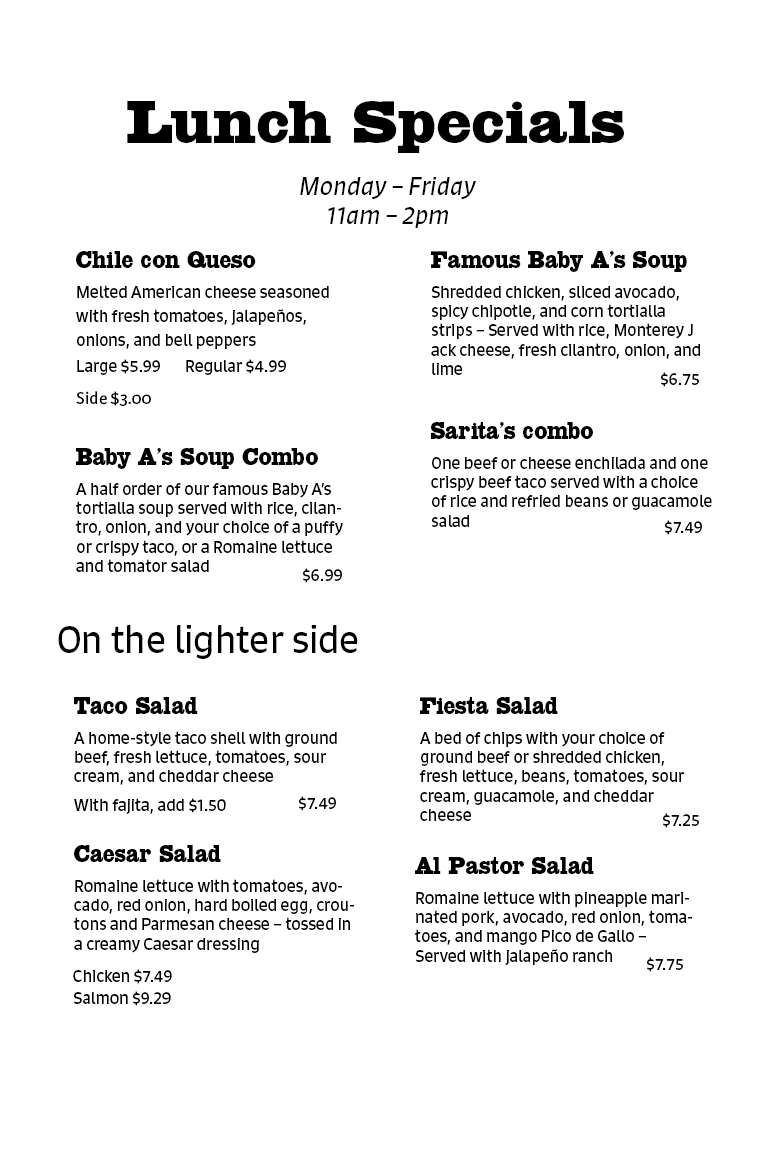
<style>
.page{position:relative;width:778px;height:1167px;background:#ffffff}
.page>*{position:absolute;margin:0}
.t1{font:60px "HWTSlabColumbian";color:#000000;scale:1.19 1}
.t2{font:24px "Signo-Italic";color:#000000}
.t3{font:24px "HWTSlabColumbian";color:#000000}
.t4{font:16px/24px "Signo-Regular";color:#000000}
.t5{font:16px "Signo-Regular";color:#000000}
.t6{font:18px "KarminaSans";color:#000000}
.t7{font:36px "Signo-Regular";color:#000000}
</style>
<div class="page">
<p class="t1" style="left:127px;top:101px;width:497px;height:52px">Lunch Specials</p>
<p class="t2" style="left:300px;top:177px;width:176px;height:51px;text-align:center">Monday – Friday<br>11am – 2pm</p>
<p class="t3" style="left:76px;top:251px;width:180px;height:17px">Chile con Queso</p>
<p class="t3" style="left:431px;top:251px;width:256px;height:21px">Famous Baby A’s Soup</p>
<p class="t4" style="left:76px;top:285px;width:253px;height:64px">Melted American cheese seasoned with fresh tomatoes, jalapeños, onions, and bell peppers</p>
<p class="t5" style="left:431px;top:286px;width:269px;height:89px">Shredded chicken, sliced avocado, spicy chipotle, and corn tortialla <br>strips – Served with rice, Monterey J<br>ack cheese, fresh cilantro, onion, and lime</p>
<p class="t5" style="left:77px;top:359px;width:83px;height:16px">Large $5.99</p>
<p class="t5" style="left:186px;top:359px;width:100px;height:16px">Regular $4.99</p>
<p class="t5" style="left:661px;top:372px;width:38px;height:15px">$6.75</p>
<p class="t6" style="left:76px;top:391px;width:75px;height:15px">Side $3.00</p>
<p class="t3" style="left:431px;top:422px;width:162px;height:17px">Sarita’s combo</p>
<p class="t3" style="left:76px;top:448px;width:242px;height:21px">Baby A’s Soup Combo</p>
<p class="t5" style="left:431px;top:457px;width:281px;height:70px">One beef or cheese enchilada and one crispy beef taco served with a choice of rice and refried beans or guacamole salad</p>
<p class="t5" style="left:75px;top:483px;width:268px;height:89px">A half order of our famous Baby A’s tortialla soup served with rice, cilantro, onion, and your choice of a puffy or crispy taco, or a Romaine lettuce and tomator salad</p>
<p class="t5" style="left:665px;top:520px;width:37px;height:15px">$7.49</p>
<p class="t5" style="left:303px;top:568px;width:39px;height:15px">$6.99</p>
<p class="t7" style="left:58px;top:625px;width:300px;height:34px">On the lighter side</p>
<p class="t3" style="left:74px;top:697px;width:124px;height:17px">Taco Salad</p>
<p class="t3" style="left:420px;top:697px;width:138px;height:17px">Fiesta Salad</p>
<p class="t5" style="left:74px;top:731px;width:263px;height:54px">A home-style taco shell with ground beef, fresh lettuce, tomatoes, sour cream, and cheddar cheese</p>
<p class="t5" style="left:419px;top:731px;width:266px;height:90px">A bed of chips with your choice of ground beef or shredded chicken, <br>fresh lettuce, beans, tomatoes, sour cream, guacamole, and cheddar <br>cheese</p>
<p class="t5" style="left:74px;top:798px;width:152px;height:16px">With fajita, add $1.50</p>
<p class="t5" style="left:299px;top:796px;width:37px;height:15px">$7.49</p>
<p class="t5" style="left:663px;top:813px;width:36px;height:15px">$7.25</p>
<p class="t3" style="left:74px;top:845px;width:147px;height:17px">Caesar Salad</p>
<p class="t3" style="left:415px;top:857px;width:179px;height:17px">Al Pastor Salad</p>
<p class="t5" style="left:73px;top:879px;width:281px;height:74px">Romaine lettuce with tomatoes, avocado, red onion, hard boiled egg, croutons and Parmesan cheese – tossed in a creamy Caesar dressing</p>
<p class="t5" style="left:414px;top:891px;width:278px;height:74px">Romaine lettuce with pineapple marinated pork, avocado, red onion, tomatoes, and mango Pico de Gallo – Served with jalapeño ranch</p>
<p class="t5" style="left:647px;top:957px;width:36px;height:15px">$7.75</p>
<p class="t5" style="left:73px;top:969px;width:99px;height:15px">Chicken $7.49</p>
<p class="t5" style="left:74px;top:991px;width:97px;height:15px">Salmon $9.29</p>
</div>
